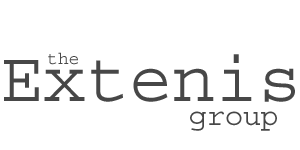
<style>
.page{position:relative;width:300px;height:150px;background:#ffffff}
.page>*{position:absolute;margin:0}
.t1{font:71.7px "Courier";color:#474747}
.t2{font:17.9px "Courier";color:#474747}
.t3{font:29.9px "Courier";color:#474747}
</style>
<div class="page">
<p class="t1" style="left:4px;top:54px;width:291px;height:48px">Extenis</p>
<p class="t2" style="left:48px;top:52px;width:30px;height:13px">the</p>
<p class="t3" style="left:190px;top:111px;width:87px;height:20px">group</p>
</div>
